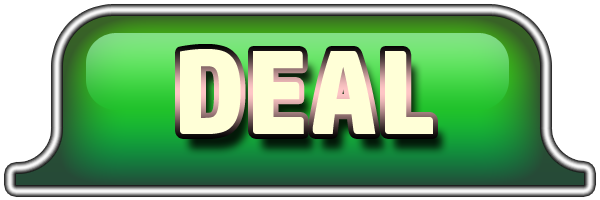
<style>
.page{position:relative;width:600px;height:200px}
.page>*{position:absolute;margin:0}
.t1{font:120px "HPSimplified-Bold";color:#ffffff}
</style>
<div class="page">
<p class="t1" style="left:180px;top:49px;width:253px;height:85px">DEAL</p>
</div>
